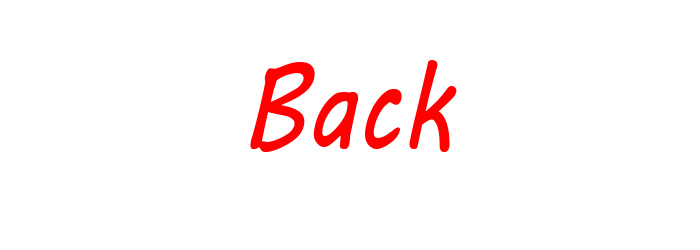
<style>
.page{position:relative;width:700px;height:250px;background:#ffffff}
.page>*{position:absolute;margin:0}
.t1{font:125px "MVBoli";color:#ff0000;scale:0.84 1}
</style>
<div class="page">
<p class="t1" style="left:250px;top:60px;width:207px;height:92px">Back</p>
</div>
